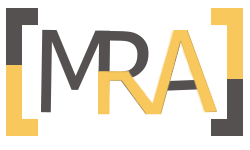
<style>
.page{position:relative;width:250px;height:150px;background:#ffffff}
.page>*{position:absolute;margin:0}
.t1{font:113.1px "Tahoma";color:#555151;scale:0.96 1}
.t2{font:113.1px "Tahoma";scale:0.96 1}
.t3{font:113.1px "Tahoma";color:#f8c85d;scale:0.96 1}
</style>
<div class="page">
<p class="t1" style="left:41px;top:29px;width:70px;height:85px;rotate:1deg">M</p>
<p class="t2" style="left:98px;top:30px;width:62px;height:84px;rotate:1deg">R</p>
<p class="t3" style="left:150px;top:30px;width:67px;height:85px;rotate:-2deg">A</p>
</div>
